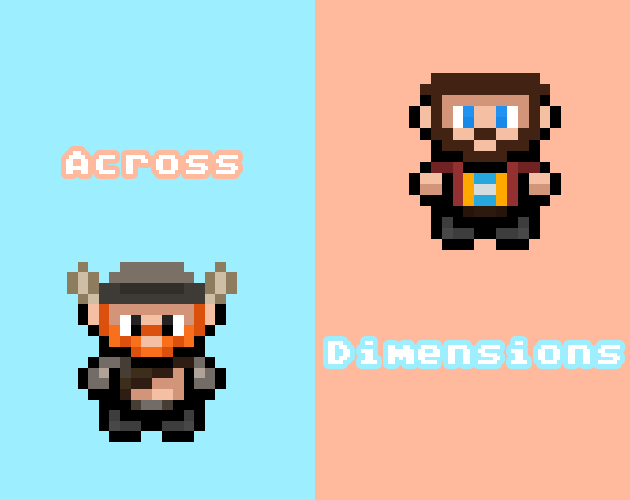
<style>
.page{position:relative;width:630px;height:500px;background:#9deeff}
.page>*{position:absolute;margin:0}
.t1{font:30px "AtariClassic-Regular";color:#ffffff}
</style>
<div class="page">
<p class="t1" style="left:66px;top:151px;width:172px;height:23px">Across</p>
<p class="t1" style="left:328px;top:341px;width:292px;height:23px">Dimensions</p>
</div>
